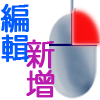
<style>
.page{position:relative;width:100px;height:100px;background:#ffffff}
.page>*{position:absolute;margin:0}
.t1{font:30px/80px "DFYuan-W5-WIN-BF";color:#015bff;font-weight:bold}
.t2{font:30px/80px "DFYuan-W5-WIN-BF";color:#ba1aad;font-weight:bold}
</style>
<div class="page">
<p class="t1" style="left:0px;top:4px;width:30px;height:58px">編輯</p>
<p class="t2" style="left:26px;top:39px;width:29px;height:59px">新增</p>
</div>
